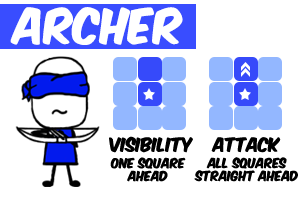
<style>
.page{position:relative;width:300px;height:200px;background:#ffffff}
.page>*{position:absolute;margin:0}
.t1{font:41.7px "KomikaAxis";color:#ffffff}
.t2{font:16.4px "KomikaAxis";color:#000000}
.t3{font:11.7px/7px "KomikaAxis";color:#000000}
</style>
<div class="page">
<p class="t1" style="left:10px;top:7px;width:173px;height:38px">archer</p>
<p class="t2" style="left:109px;top:136px;width:84px;height:17px">visibility</p>
<p class="t2" style="left:211px;top:137px;width:70px;height:16px">attack</p>
<p class="t3" style="left:110px;top:157px;width:76px;height:25px;text-align:center">one square<br>ahead</p>
<p class="t3" style="left:194px;top:157px;width:104px;height:25px;text-align:center">all squares<br>straight ahead</p>
</div>
